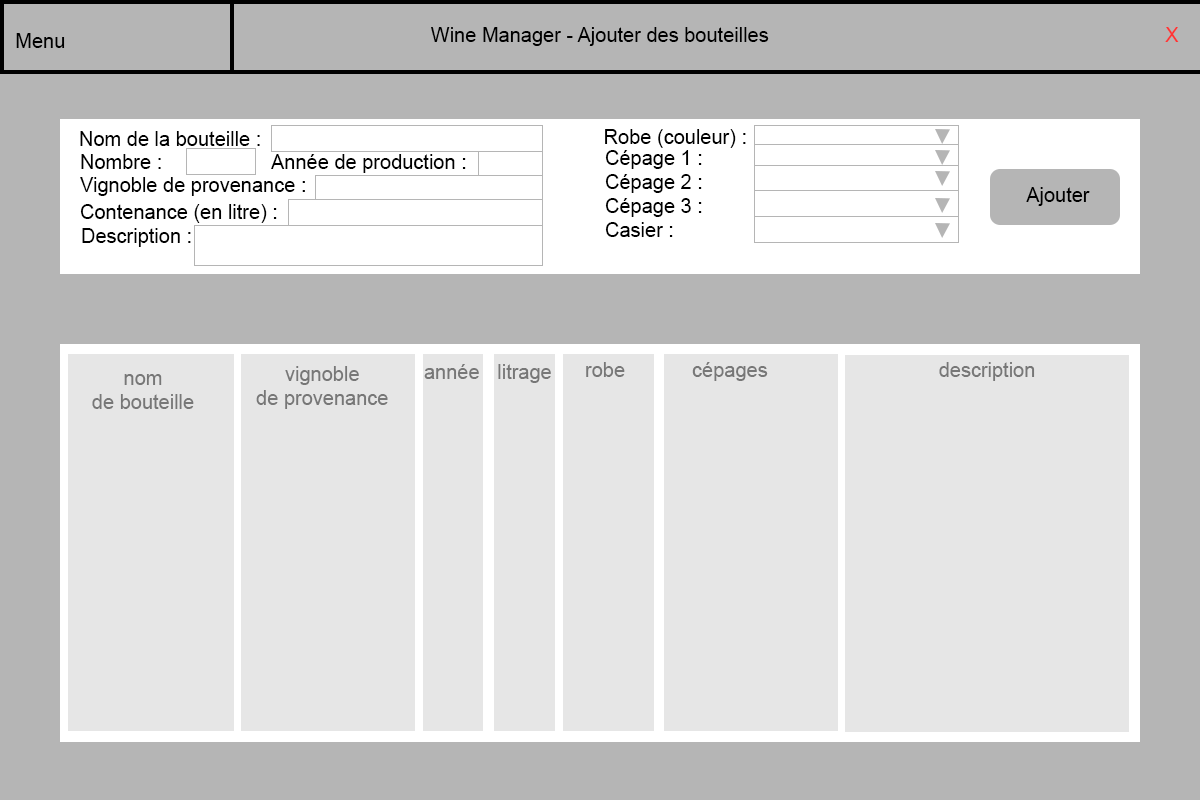
<style>
.page{position:relative;width:1200px;height:800px;background:#e6e6e6}
.page>*{position:absolute;margin:0}
.t1{font:20px "ArialMT";color:#000000}
.t2{font:20px "ArialMT";color:#ff3333}
.t3{font:20px "ArialMT";color:#777777}
</style>
<div class="page">
<p class="t1" style="left:431px;top:27px;width:338px;height:19px">Wine Manager - Ajouter des bouteilles</p>
<p class="t2" style="left:1165px;top:27px;width:14px;height:15px">X</p>
<p class="t1" style="left:16px;top:33px;width:49px;height:15px">Menu</p>
<p class="t1" style="left:80px;top:131px;width:180px;height:15px">Nom de la bouteille :</p>
<p class="t1" style="left:605px;top:129px;width:141px;height:19px">Robe (couleur) :</p>
<p class="t1" style="left:605px;top:150px;width:97px;height:87px">Cépage 1 :<br>Cépage 2 :<br>Cépage 3 :<br>Casier :</p>
<p class="t1" style="left:81px;top:154px;width:80px;height:15px">Nombre :</p>
<p class="t1" style="left:271px;top:154px;width:195px;height:19px">Année de production :</p>
<p class="t1" style="left:80px;top:177px;width:225px;height:19px">Vignoble de provenance :</p>
<p class="t1" style="left:1026px;top:187px;width:64px;height:19px">Ajouter</p>
<p class="t1" style="left:80px;top:204px;width:197px;height:19px">Contenance (en litre) :</p>
<p class="t1" style="left:82px;top:228px;width:109px;height:19px">Description :</p>
<p class="t3" style="left:256px;top:366px;width:132px;height:43px;text-align:center">vignoble<br>de provenance</p>
<p class="t3" style="left:424px;top:364px;width:55px;height:15px">année</p>
<p class="t3" style="left:498px;top:364px;width:53px;height:19px">litrage</p>
<p class="t3" style="left:586px;top:362px;width:39px;height:15px">robe</p>
<p class="t3" style="left:692px;top:362px;width:76px;height:19px">cépages</p>
<p class="t3" style="left:939px;top:362px;width:96px;height:19px">description</p>
<p class="t3" style="left:92px;top:374px;width:102px;height:35px;text-align:center">nom<br>de bouteille</p>
</div>
